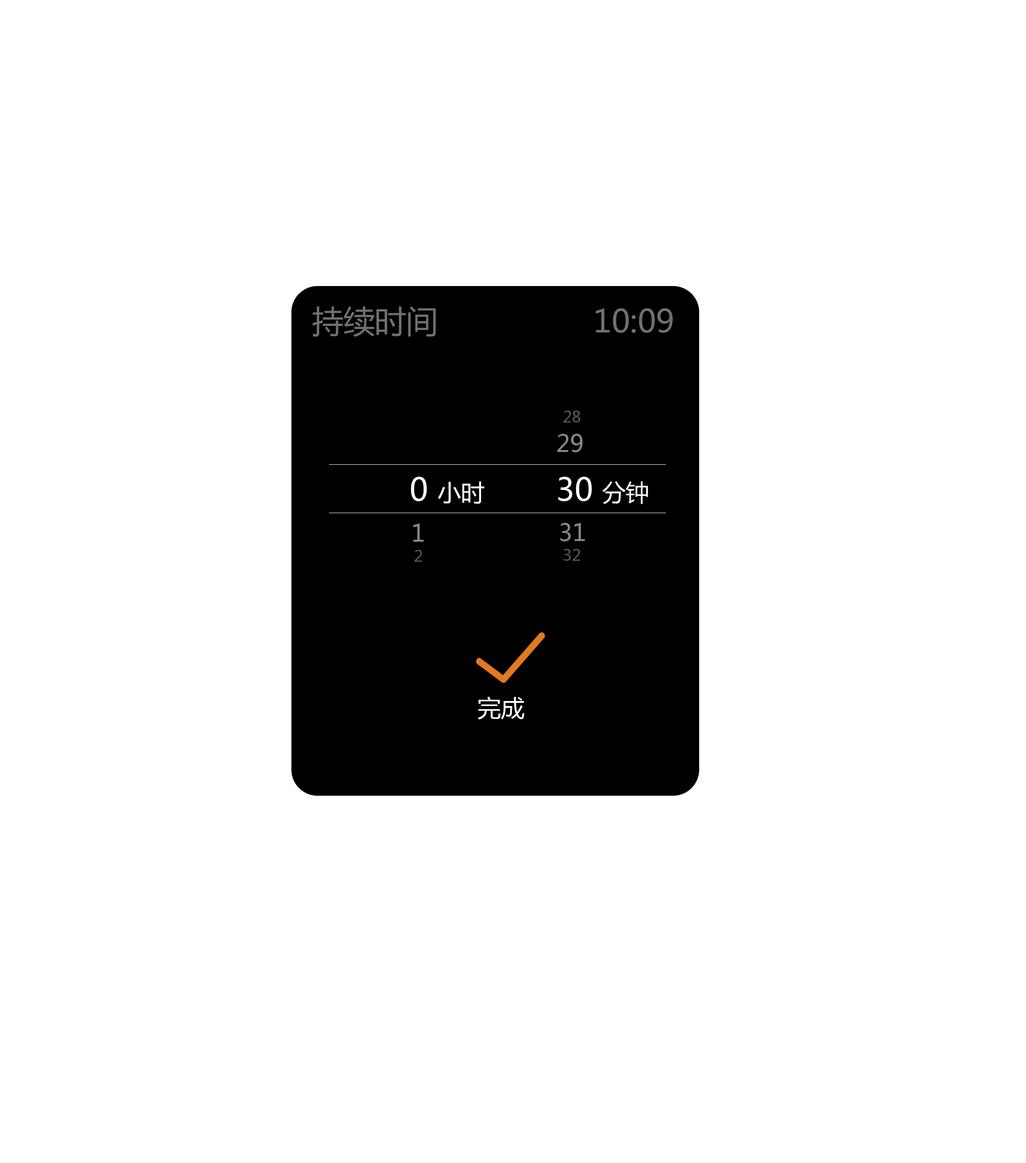
<style>
.page{position:relative;width:1026px;height:1163px;background:#ffffff}
.page>*{position:absolute;margin:0}
.t1{font:31.4px "MicrosoftYaHei";color:#717071}
.t2{font:15.7px "MicrosoftYaHei";color:#595757}
.t3{font:23.5px "MicrosoftYaHei";color:#888888}
.t4{font:23.5px "MicrosoftYaHei";color:#ffffff}
.t5{font:31.4px "MicrosoftYaHei";color:#ffffff}
</style>
<div class="page">
<p class="t1" style="left:312px;top:306px;width:124px;height:31px">持续时间</p>
<p class="t1" style="left:595px;top:308px;width:78px;height:25px">10:09</p>
<p class="t2" style="left:563px;top:410px;width:17px;height:12px">28</p>
<p class="t3" style="left:557px;top:434px;width:25px;height:18px">29</p>
<p class="t4" style="left:411px;top:477px;width:73px;height:27px"><span class="t5">0 </span>小时</p>
<p class="t5" style="left:558px;top:477px;width:90px;height:27px">30 <span class="t4">分钟</span></p>
<p class="t3" style="left:413px;top:523px;width:11px;height:19px">1</p>
<p class="t3" style="left:560px;top:523px;width:25px;height:18px">31</p>
<p class="t2" style="left:414px;top:550px;width:8px;height:12px">2</p>
<p class="t2" style="left:563px;top:549px;width:17px;height:12px">32</p>
<p class="t4" style="left:478px;top:696px;width:46px;height:23px">完成</p>
</div>
